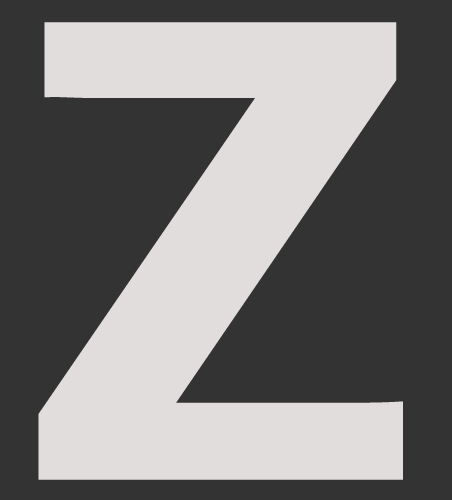
<style>
.page{position:relative;width:452px;height:500px;background:#333333}
.page>*{position:absolute;margin:0}
.t1{font:650.4px "DFGothic-EB-WIN-RKSJ-H";color:#e2dddd;scale:1.36 1}
</style>
<div class="page">
<p class="t1" style="left:38px;top:22px;width:365px;height:458px">Z</p>
</div>
